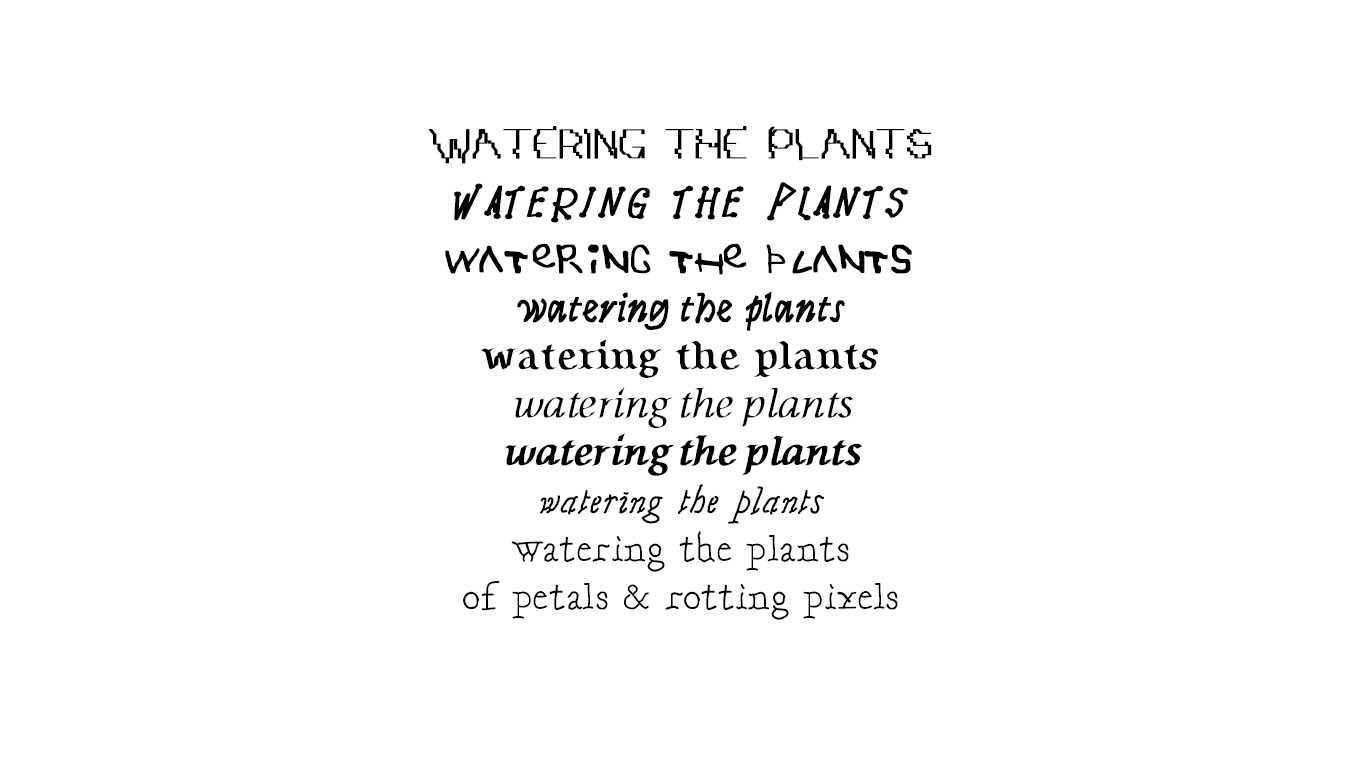
<style>
.page{position:relative;width:1366px;height:768px;background:#ffffff}
.page>*{position:absolute;margin:0}
.t1{font:40px "Garamondt-Regular";color:#000000}
.t2{font:32px/36px "CMRDD-Bold";color:#000000;font-weight:bold;scale:1.25 1}
.t3{font:36px "Manusquared-Regular";color:#000000;font-weight:bold}
.t4{font:38.4px "PunkNova-Slanted";color:#000000;text-transform:uppercase;font-weight:bold;scale:1.25 1}
.t5{font:40px "JRUGPUNK";color:#000000;font-weight:bold}
.t6{font:40px "Syne-Italic";color:#000000;font-weight:bold}
.t7{font:40px "AutopiaBold";color:#000000}
.t8{font:40px "Autopia-Italic";color:#000000}
.t9{font:40px "Autopia-Bold-Italic";color:#000000}
.t10{font:40px "Garamondt-Italic";color:#000000}
</style>
<div class="page">
<p class="t1" style="left:428px;top:126px;width:504px;height:494px;text-align:center"><span class="t2"><br><br><br></span><span class="t3">WATERING THE PLANTS<br></span><span class="t4">watering the plants<br></span><span class="t5">watering the plantS  <br></span><span class="t6">watering the plants<br></span><span class="t7">watering the plants<br></span><span class="t8">watering the plants<br></span><span class="t9">watering the plants<br></span><span class="t10">watering the plants<br></span>watering the plants<br>of petals &amp; rotting pixels</p>
</div>
